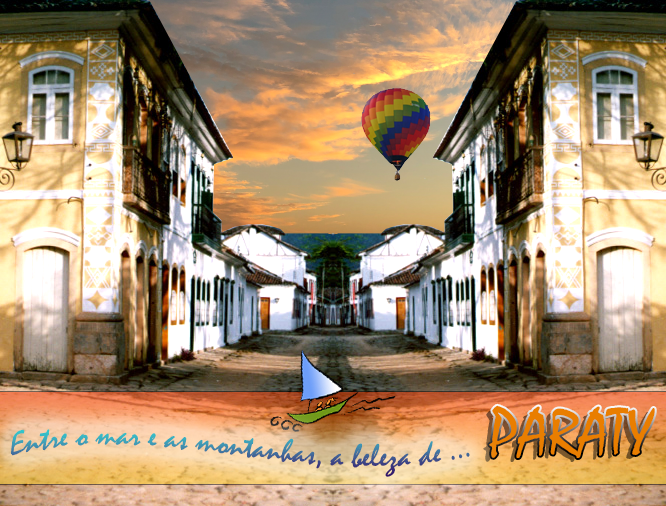
<style>
.page{position:relative;width:666px;height:506px}
.page>*{position:absolute;margin:0}
.t1{font:66.7px "Mistral";color:#e97e00}
.t2{font:33.3px "Mistral"}
</style>
<div class="page">
<p class="t1" style="left:489px;top:405px;width:166px;height:53px">PARATY</p>
<p class="t2" style="left:11px;top:429px;width:459px;height:48px">Entre o mar e as montanhas, a beleza de ...</p>
</div>
